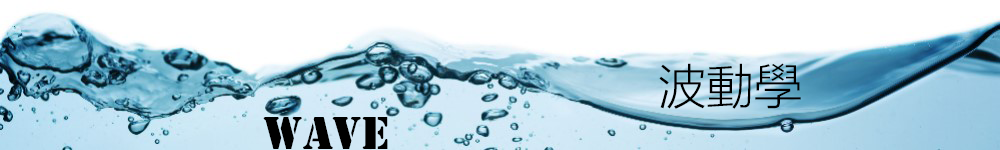
<style>
.page{position:relative;width:1000px;height:150px;background:#ffffff}
.page>*{position:absolute;margin:0}
.t1{font:48px "MicrosoftYaHeiUILight";color:#000000}
.t2{font:48px "Stencil";color:#000000}
</style>
<div class="page">
<p class="t1" style="left:659px;top:63px;width:142px;height:46px">波動學</p>
<p class="t2" style="left:263px;top:117px;width:125px;height:32px">WAVE</p>
</div>
